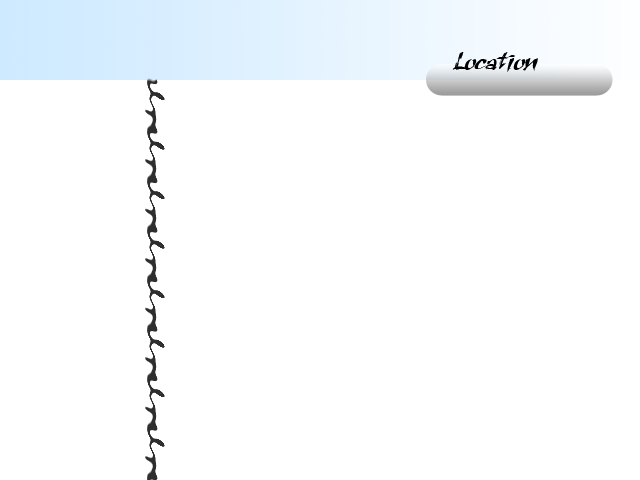
<style>
.page{position:relative;width:640px;height:480px;background:#ffffff}
.page>*{position:absolute;margin:0}
.t1{font:20.8px "RoughBrush";letter-spacing:-0.05em;color:#000000}
</style>
<div class="page">
<p class="t1" style="left:452px;top:52px;width:86px;height:20px">Location</p>
</div>
